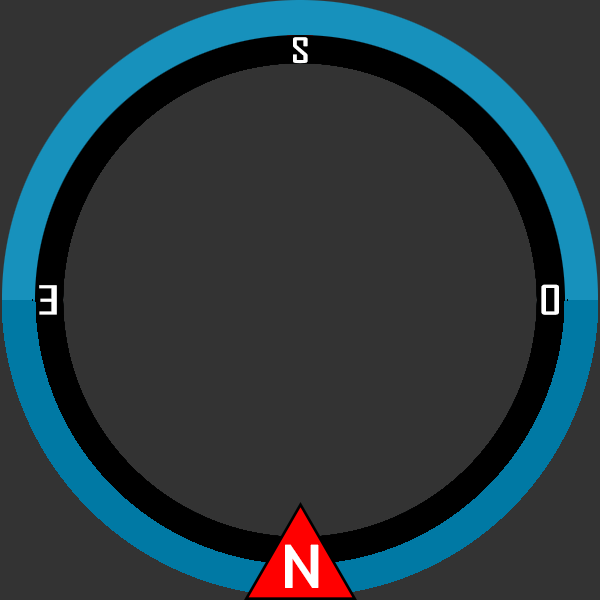
<style>
.page{position:relative;width:600px;height:600px;background:#333333}
.page>*{position:absolute;margin:0}
.t1{font:32.6px "AgencyFB-Reg";color:#ffffff;font-weight:bold;scale:1.41 1}
.t2{font:37.2px "AgencyFB-Reg";color:#ffffff;font-weight:bold;scale:1.8 1}
.t3{font:38px "AgencyFB-Reg";color:#ffffff;font-weight:bold;scale:1.33 1}
.t4{font:55.4px "AgencyFB-Reg";color:#ffffff;font-weight:bold;scale:1.87 1}
</style>
<div class="page">
<p class="t1" style="left:293px;top:37px;width:15px;height:26px;rotate:180deg">S</p>
<p class="t2" style="left:39px;top:285px;width:18px;height:30px;rotate:180deg">E</p>
<p class="t3" style="left:541px;top:284px;width:18px;height:31px">O</p>
<p class="t4" style="left:285px;top:544px;width:34px;height:44px;rotate:180deg">N</p>
</div>
